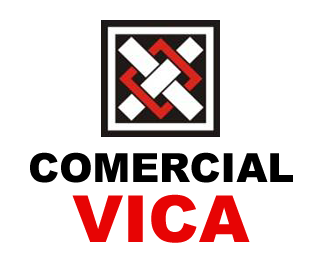
<style>
.page{position:relative;width:320px;height:260px;background:#ffffff}
.page>*{position:absolute;margin:0}
.t1{font:40px/60px "Arial-Black";color:#000000}
.t2{font:65px/60px "Arial-Black";color:#e70404}
</style>
<div class="page">
<p class="t1" style="left:30px;top:152px;width:263px;height:91px;text-align:center">COMERCIAL<br><span class="t2">VICA</span></p>
</div>
